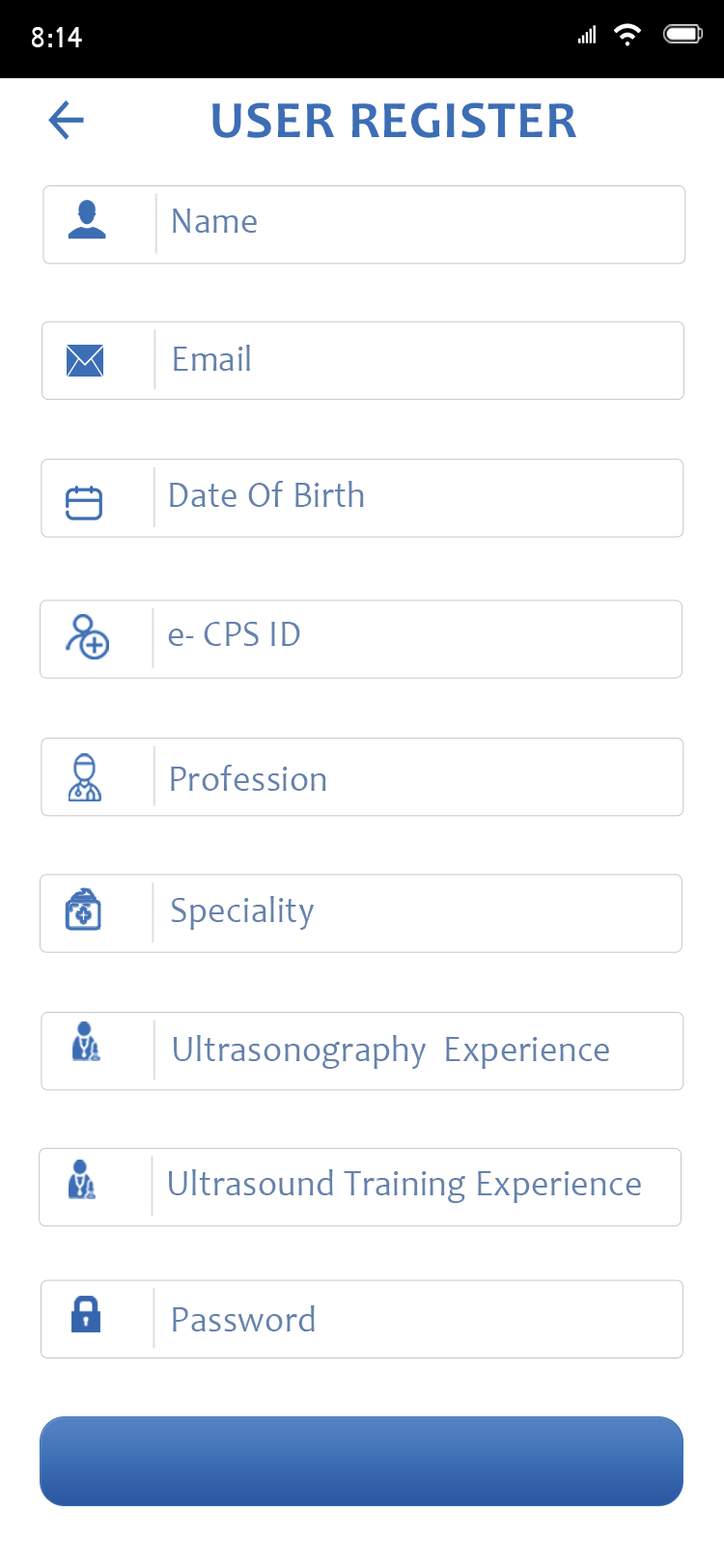
<style>
.page{position:relative;width:724px;height:1568px;background:#ffffff}
.page>*{position:absolute;margin:0}
.t1{font:31.3px "Shruti";color:#ffffff;scale:0.94 1}
.t2{font:52.8px "Candara-Bold";letter-spacing:0.02em;color:#3c6eb5;text-transform:uppercase}
.t3{font:37px "Candara";letter-spacing:0.02em;color:#6582ac;scale:0.93 1}
</style>
<div class="page">
<p class="t1" style="left:32px;top:27px;width:50px;height:20px">8:14</p>
<p class="t2" style="left:212px;top:102px;width:364px;height:36px">User Register</p>
<p class="t3" style="left:173px;top:209px;width:84px;height:24px">Name</p>
<p class="t3" style="left:174px;top:345px;width:76px;height:26px">Email</p>
<p class="t3" style="left:170px;top:481px;width:194px;height:26px">Date Of Birth</p>
<p class="t3" style="left:168px;top:622px;width:132px;height:24px">e- CPS ID</p>
<p class="t3" style="left:171px;top:765px;width:155px;height:26px">Profession</p>
<p class="t3" style="left:171px;top:896px;width:143px;height:34px">Speciality</p>
<p class="t3" style="left:174px;top:1035px;width:435px;height:34px">Ultrasonography  Experience</p>
<p class="t3" style="left:169px;top:1169px;width:472px;height:34px">Ultrasound Training Experience</p>
<p class="t3" style="left:173px;top:1305px;width:142px;height:26px">Password</p>
</div>
